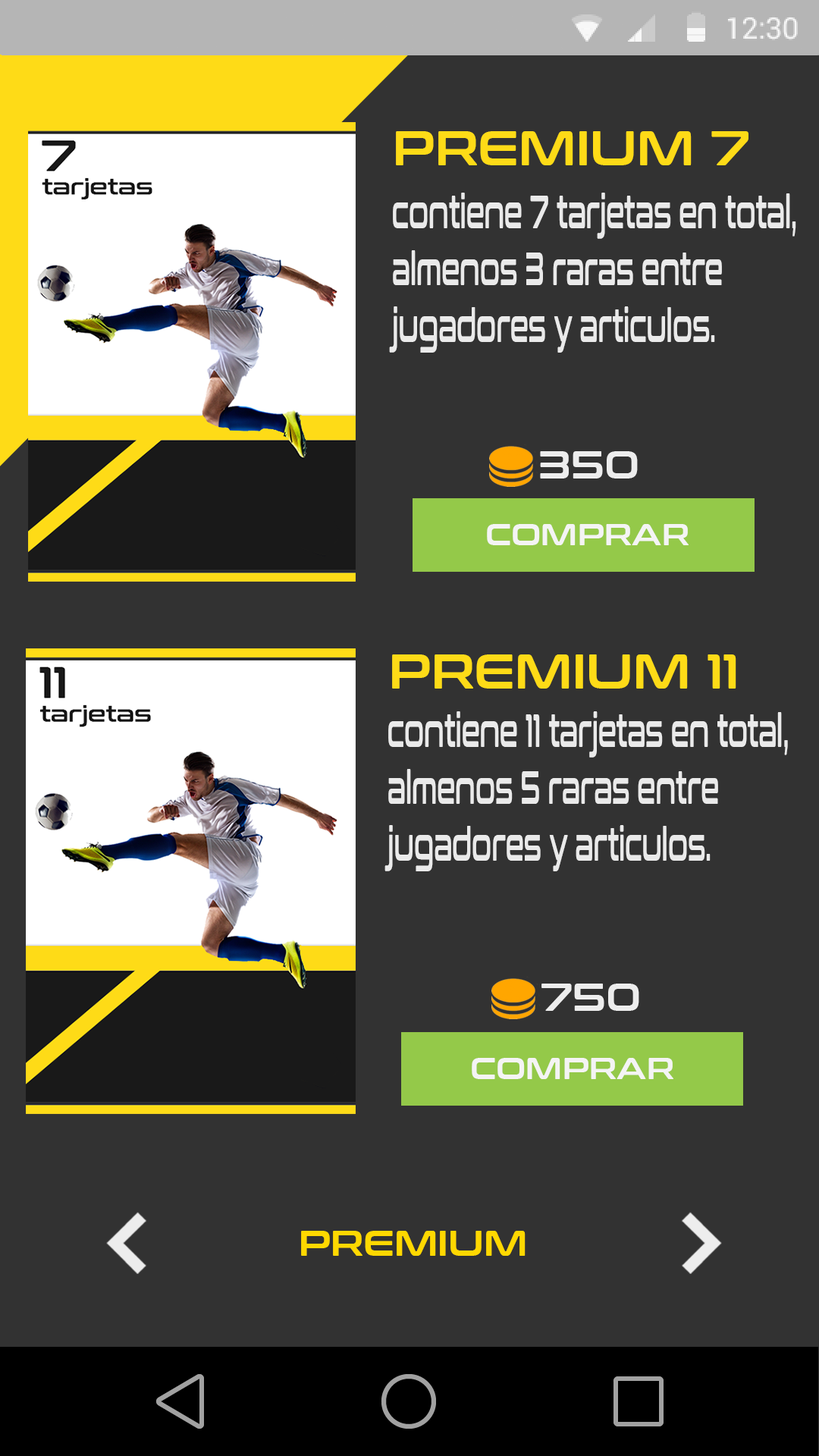
<style>
.page{position:relative;width:819px;height:1456px;background:#323232}
.page>*{position:absolute;margin:0}
.t1{font:48px "ConthraxSb-Regular";color:#fedb17}
.t2{font:47.4px "ConthraxSb-Regular";color:#eaeaea;scale:0.48 1}
.t3{font:38.5px "ConthraxSb-Regular";color:#ededed}
.t4{font:30.4px "ConthraxSb-Regular";color:#f4f4f4}
.t5{font:36.4px "ConthraxSb-Regular";color:#ffd800}
</style>
<div class="page">
<p class="t1" style="left:396px;top:131px;width:352px;height:34px">PREMIUM 7</p>
<p class="t2" style="left:389px;top:193px;width:407px;height:160px">contiene 7 tarjetas en total,<br>almenos 3 raras entre <br>jugadores y articulos.</p>
<p class="t3" style="left:540px;top:451px;width:98px;height:28px">350</p>
<p class="t4" style="left:487px;top:524px;width:202px;height:21px">COMPRAR</p>
<p class="t1" style="left:392px;top:654px;width:344px;height:35px">PREMIUM 11</p>
<p class="t2" style="left:384px;top:711px;width:404px;height:160px">contiene 11 tarjetas en total,<br>almenos 5 raras entre <br>jugadores y articulos.</p>
<p class="t3" style="left:541px;top:984px;width:98px;height:27px">750</p>
<p class="t4" style="left:472px;top:1058px;width:201px;height:21px">COMPRAR</p>
<p class="t5" style="left:301px;top:1231px;width:225px;height:25px">PREMIUM</p>
</div>
